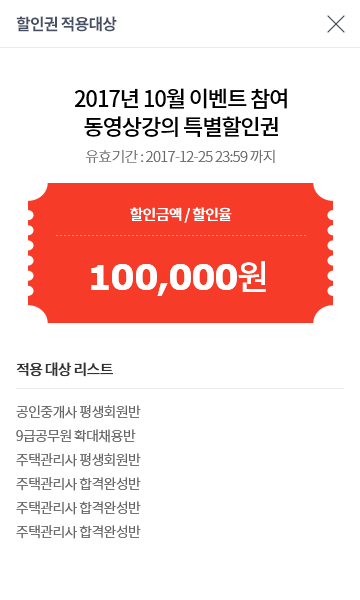
<style>
.page{position:relative;width:360px;height:600px;background:#ffffff}
.page>*{position:absolute;margin:0}
.t1{font:16px "NotoSansCJKkr-Bold";letter-spacing:-0.05em;color:#454f63}
.t2{font:22px/28px "NotoSansCJKkr-Medium";letter-spacing:-0.05em;color:#000000}
.t3{font:15px "NotoSansCJKkr-Light";letter-spacing:-0.05em;color:#666666}
.t4{font:15px "NotoSansCJKkr-Medium";letter-spacing:-0.05em;color:#ffffff}
.t5{font:35px "Verdana-Bold";letter-spacing:-0.05em;color:#ffffff}
.t6{font:35px "NotoSansCJKkr-Medium";letter-spacing:-0.05em;color:#ffffff}
.t7{font:15px "NotoSansCJKkr-Medium";letter-spacing:-0.05em;color:#333333}
.t8{font:14px/24px "NotoSansCJKkr-DemiLight";letter-spacing:-0.05em;color:#666666}
</style>
<div class="page">
<p class="t1" style="left:16px;top:16px;width:101px;height:16px">할인권 적용대상</p>
<p class="t2" style="left:74px;top:88px;width:213px;height:49px;text-align:center">2017년 10월 이벤트 참여<br>동영상강의 특별할인권</p>
<p class="t3" style="left:85px;top:149px;width:190px;height:14px">유효기간 : 2017-12-25 23:59 까지</p>
<p class="t4" style="left:130px;top:207px;width:102px;height:16px">할인금액 / 할인율</p>
<p class="t5" style="left:91px;top:261px;width:175px;height:35px">100,000<span class="t6">원</span></p>
<p class="t7" style="left:16px;top:362px;width:97px;height:15px">적용 대상 리스트</p>
<p class="t8" style="left:16px;top:405px;width:125px;height:134px">공인중개사 평생회원반<br>9급공무원 확대채용반<br>주택관리사 평생회원반<br>주택관리사 합격완성반<br>주택관리사 합격완성반<br>주택관리사 합격완성반</p>
</div>
